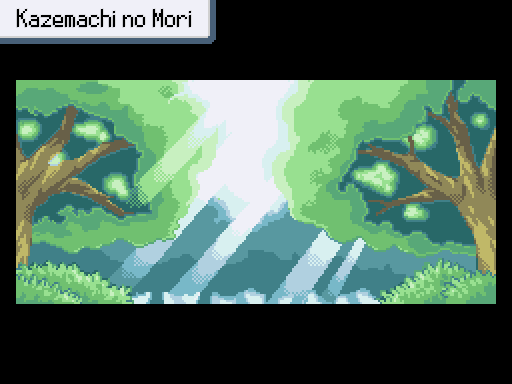
<style>
.page{position:relative;width:512px;height:384px;background:#000000}
.page>*{position:absolute;margin:0}
.t1{font:26px "PowerClear-Regular";color:#000000}
</style>
<div class="page">
<p class="t1" style="left:17px;top:9px;width:174px;height:18px">Kazemachi no Mori</p>
</div>
